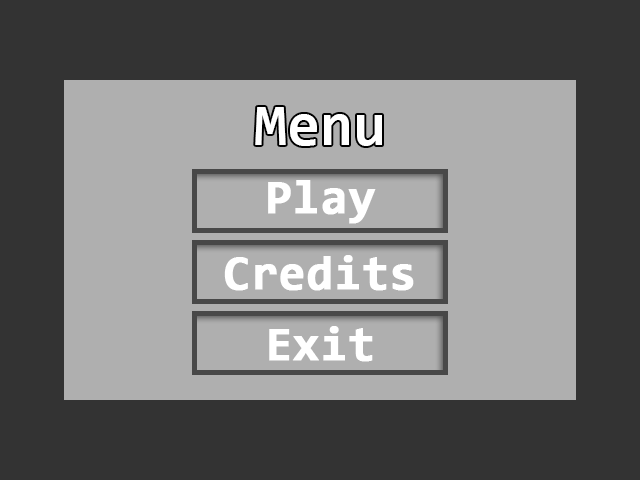
<style>
.page{position:relative;width:640px;height:480px;background:#333333}
.page>*{position:absolute;margin:0}
.t1{font:60px "Consolas-Bold";color:#ffffff}
.t2{font:48px "Consolas-Bold";color:#ffffff;font-weight:bold}
</style>
<div class="page">
<p class="t1" style="left:255px;top:107px;width:127px;height:39px">Menu</p>
<p class="t2" style="left:268px;top:180px;width:108px;height:44px">Play</p>
<p class="t2" style="left:224px;top:255px;width:190px;height:36px">Credits</p>
<p class="t2" style="left:269px;top:326px;width:104px;height:36px">Exit</p>
</div>
